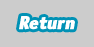
<style>
.page{position:relative;width:94px;height:47px;background:#cccccc}
.page>*{position:absolute;margin:0}
.t1{font:18px "OfficinaSansBlackOSC";letter-spacing:-0.025em;color:#ffffff;font-weight:bold;font-style:italic}
</style>
<div class="page">
<p class="t1" style="left:19px;top:16px;width:56px;height:14px">Return</p>
</div>
